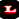
<style>
.page{position:relative;width:19px;height:19px;background:#000000}
.page>*{position:absolute;margin:0}
.t1{font:8.4px "LatinWide";color:#ffffff}
</style>
<div class="page">
<p class="t1" style="left:4px;top:6px;width:12px;height:6px">L</p>
</div>
